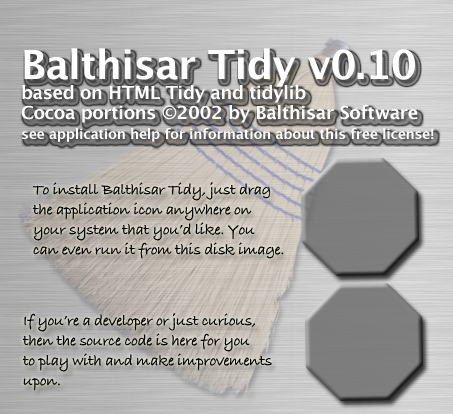
<style>
.page{position:relative;width:453px;height:414px}
.page>*{position:absolute;margin:0}
.t1{font:18px "LucidaGrande-Bold";letter-spacing:-0.02em;color:#ffffff}
.t2{font:40px "LucidaGrande-Bold";letter-spacing:-0.02em;color:#ffffff}
.t3{font:14px "LucidaGrande-Bold";letter-spacing:-0.02em;color:#ffffff}
.t4{font:16px "BradleyHandITCTTBold";letter-spacing:-0.02em;color:#000000}
</style>
<div class="page">
<p class="t1" style="left:21px;top:48px;width:413px;height:94px"><span class="t2">Balthisar Tidy v0.10<br></span>based on HTML Tidy and tidylib<br>Cocoa portions ©2002 by Balthisar Software<br><span class="t3">see application help for information about this free license!</span></p>
<p class="t4" style="left:32px;top:182px;width:252px;height:77px">To install Balthisar Tidy, just drag<br>the application icon anywhere on<br>your system that you’d like. You<br>can even run it from this disk image.</p>
<p class="t4" style="left:22px;top:313px;width:250px;height:78px">If you’re a developer or just curious,<br>then the source code is here for you<br>to play with and make improvements<br>upon.</p>
</div>
